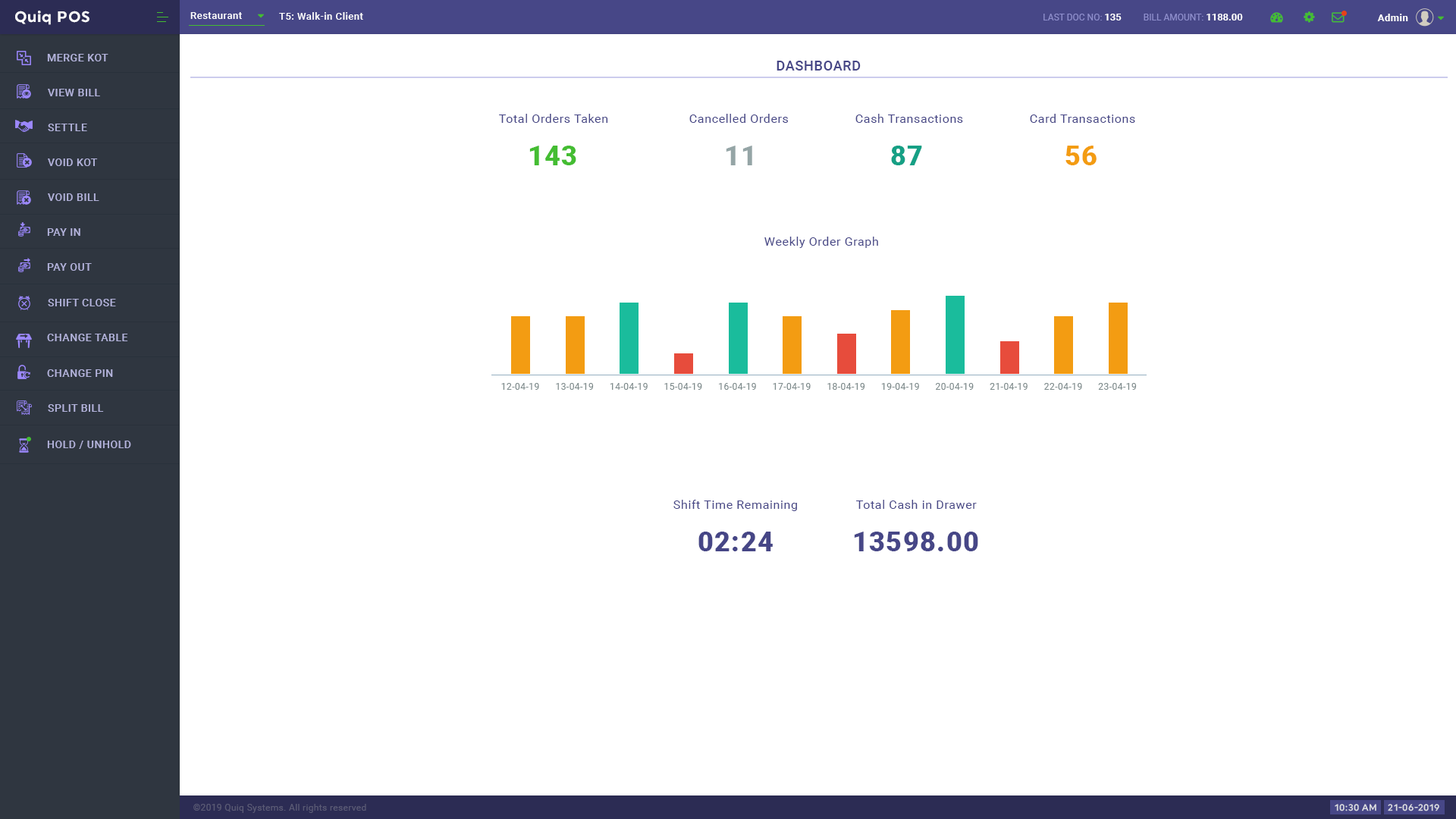
<style>
.page{position:relative;width:1456px;height:819px;background:#ffffff}
.page>*{position:absolute;margin:0}
.t1{font:15.2px "Uniform-Bold";letter-spacing:0.04em;color:#ffffff}
.t2{font:9.9px "Roboto-Medium";letter-spacing:0.04em;color:#ffffff}
.t3{font:9.1px "Roboto-Regular";color:#8e8ecc;text-transform:uppercase}
.t4{font:9.9px "Roboto-Bold";color:#ffffff;text-transform:uppercase}
.t5{font:9.9px "Roboto-Bold";letter-spacing:0.04em;color:#ffffff}
.t6{font:10.6px "Roboto-Medium";letter-spacing:0.04em;color:#b3b3db;text-transform:uppercase}
.t7{font:13.6px "Roboto-Medium";letter-spacing:0.04em;color:#474787;text-transform:uppercase}
.t8{font:12.1px "Roboto-Regular";letter-spacing:0.04em;color:#474787}
.t9{font:27.3px "Roboto-Black";letter-spacing:0.04em;color:#44bd32}
.t10{font:27.3px "Roboto-Black";letter-spacing:0.04em;color:#95a5a6}
.t11{font:27.3px "Roboto-Black";letter-spacing:0.04em;color:#16a085}
.t12{font:27.3px "Roboto-Black";letter-spacing:0.04em;color:#f39c12}
.t13{font:9.1px "Roboto-Regular";letter-spacing:0.04em;color:#7f8c8d}
.t14{font:27.3px "Roboto-Black";letter-spacing:0.04em;color:#464686}
.t15{font:27.3px "Roboto-Black";letter-spacing:0.04em;color:#474787}
.t16{font:9.1px "Roboto-Regular";letter-spacing:0.03em;color:#5a5a75}
.t17{font:9.1px "Uniform-Medium";letter-spacing:0.04em;color:#dcdde1;text-transform:uppercase}
</style>
<div class="page">
<p class="t1" style="left:15px;top:11px;width:74px;height:14px">Quiq POS</p>
<p class="t2" style="left:190px;top:12px;width:52px;height:7px">Restaurant</p>
<p class="t2" style="left:279px;top:12px;width:84px;height:8px">T5: Walk-in Client</p>
<p class="t3" style="left:1043px;top:14px;width:200px;height:6px">Last Doc No: <span class="t4">135         </span>Bill Amount: <span class="t4">1188.00</span></p>
<p class="t5" style="left:1377px;top:14px;width:31px;height:7px">Admin</p>
<p class="t6" style="left:47px;top:54px;width:61px;height:7px">Merge Kot</p>
<p class="t7" style="left:777px;top:61px;width:84px;height:10px">Dashboard</p>
<p class="t6" style="left:48px;top:89px;width:52px;height:7px">View Bill</p>
<p class="t8" style="left:499px;top:114px;width:109px;height:9px">Total Orders Taken</p>
<p class="t8" style="left:689px;top:114px;width:99px;height:9px">Cancelled Orders</p>
<p class="t8" style="left:855px;top:114px;width:108px;height:9px">Cash Transactions</p>
<p class="t8" style="left:1030px;top:114px;width:105px;height:9px">Card Transactions</p>
<p class="t6" style="left:48px;top:124px;width:39px;height:7px">Settle</p>
<p class="t9" style="left:529px;top:146px;width:47px;height:19px">143</p>
<p class="t10" style="left:726px;top:146px;width:26px;height:19px">11</p>
<p class="t11" style="left:891px;top:146px;width:31px;height:19px">87</p>
<p class="t12" style="left:1065px;top:146px;width:32px;height:19px">56</p>
<p class="t6" style="left:48px;top:158px;width:50px;height:8px">Void Kot</p>
<p class="t6" style="left:48px;top:193px;width:51px;height:8px">Void Bill</p>
<p class="t6" style="left:47px;top:228px;width:33px;height:8px">Pay In</p>
<p class="t8" style="left:764px;top:237px;width:114px;height:11px">Weekly Order Graph</p>
<p class="t6" style="left:47px;top:263px;width:45px;height:8px">Pay out</p>
<p class="t6" style="left:48px;top:299px;width:68px;height:7px">Shift Close</p>
<p class="t6" style="left:47px;top:334px;width:81px;height:7px">Change Table</p>
<p class="t6" style="left:47px;top:369px;width:66px;height:8px">Change Pin</p>
<p class="t13" style="left:501px;top:383px;width:636px;height:7px">12-04-19      13-04-19      14-04-19      15-04-19      16-04-19      17-04-19      18-04-19      19-04-19      20-04-19      21-04-19      22-04-19      23-04-19</p>
<p class="t6" style="left:48px;top:404px;width:56px;height:8px">Split Bill</p>
<p class="t6" style="left:47px;top:441px;width:84px;height:8px">Hold / Unhold</p>
<p class="t8" style="left:673px;top:500px;width:124px;height:11px">Shift Time Remaining</p>
<p class="t8" style="left:856px;top:500px;width:121px;height:9px">Total Cash in Drawer</p>
<p class="t14" style="left:698px;top:532px;width:75px;height:19px">02:24</p>
<p class="t15" style="left:854px;top:532px;width:124px;height:19px">13598.00</p>
<p class="t16" style="left:193px;top:804px;width:173px;height:9px">©2019 Quiq Systems. All rights reserved</p>
<p class="t17" style="left:1335px;top:804px;width:41px;height:7px">10:30 am</p>
<p class="t17" style="left:1388px;top:804px;width:51px;height:7px">21-06-2019</p>
</div>
